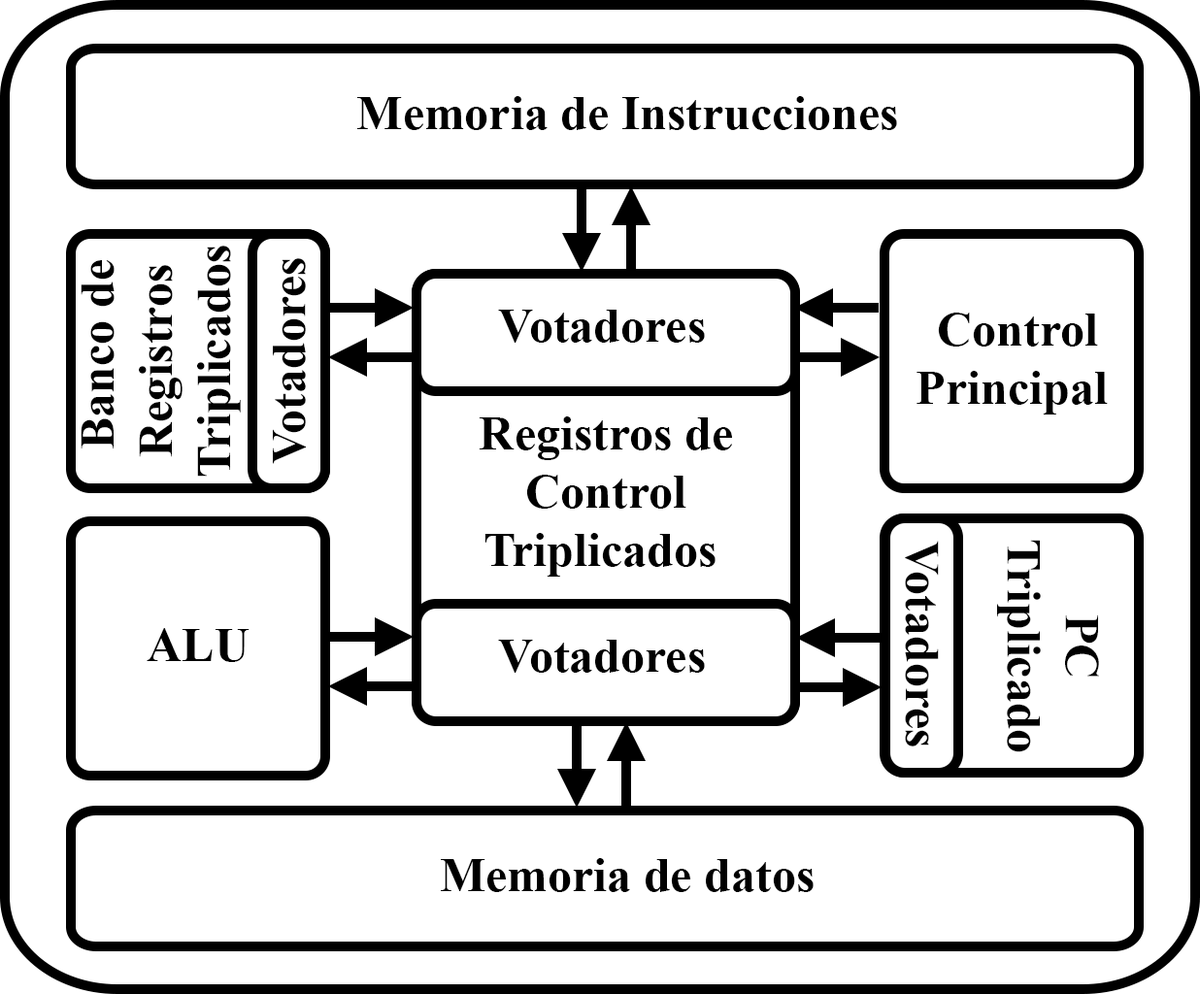
<style>
.page{position:relative;width:1200px;height:994px;background:#ffffff}
.page>*{position:absolute;margin:0}
.t1{font:48.5px "TimesNewRomanPS-BoldMT";color:#000000}
.t2{font:48.6px "TimesNewRomanPS-BoldMT";color:#000000}
</style>
<div class="page">
<p class="t1" style="left:357px;top:96px;width:540px;height:34px">Memoria de Instrucciones</p>
<p class="t1" style="left:81px;top:246px;width:160px;height:231px;text-align:center;rotate:-90deg">Banco de <br>Registros<br>Triplicados</p>
<p class="t1" style="left:273px;top:258px;width:33px;height:206px;rotate:-90deg">Votadores</p>
<p class="t1" style="left:498px;top:310px;width:207px;height:33px">Votadores</p>
<p class="t1" style="left:916px;top:313px;width:191px;height:101px;text-align:center">Control <br>Principal</p>
<p class="t2" style="left:479px;top:416px;width:253px;height:161px;text-align:center">Registros de <br>Control <br>Triplicados</p>
<p class="t1" style="left:905px;top:541px;width:34px;height:205px;rotate:90deg">Votadores</p>
<p class="t1" style="left:997px;top:540px;width:102px;height:212px;text-align:center;rotate:90deg">PC<br>Triplicado</p>
<p class="t1" style="left:147px;top:628px;width:102px;height:34px">ALU</p>
<p class="t1" style="left:498px;top:640px;width:207px;height:33px">Votadores</p>
<p class="t1" style="left:441px;top:858px;width:372px;height:34px">Memoria de datos</p>
</div>
